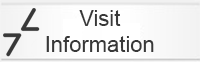
<style>
.page{position:relative;width:200px;height:62px}
.page>*{position:absolute;margin:0}
.t1{font:22px "ArialMT";color:#383838}
</style>
<div class="page">
<p class="t1" style="left:46px;top:10px;width:108px;height:42px;text-align:center">Visit<br>Information</p>
</div>
